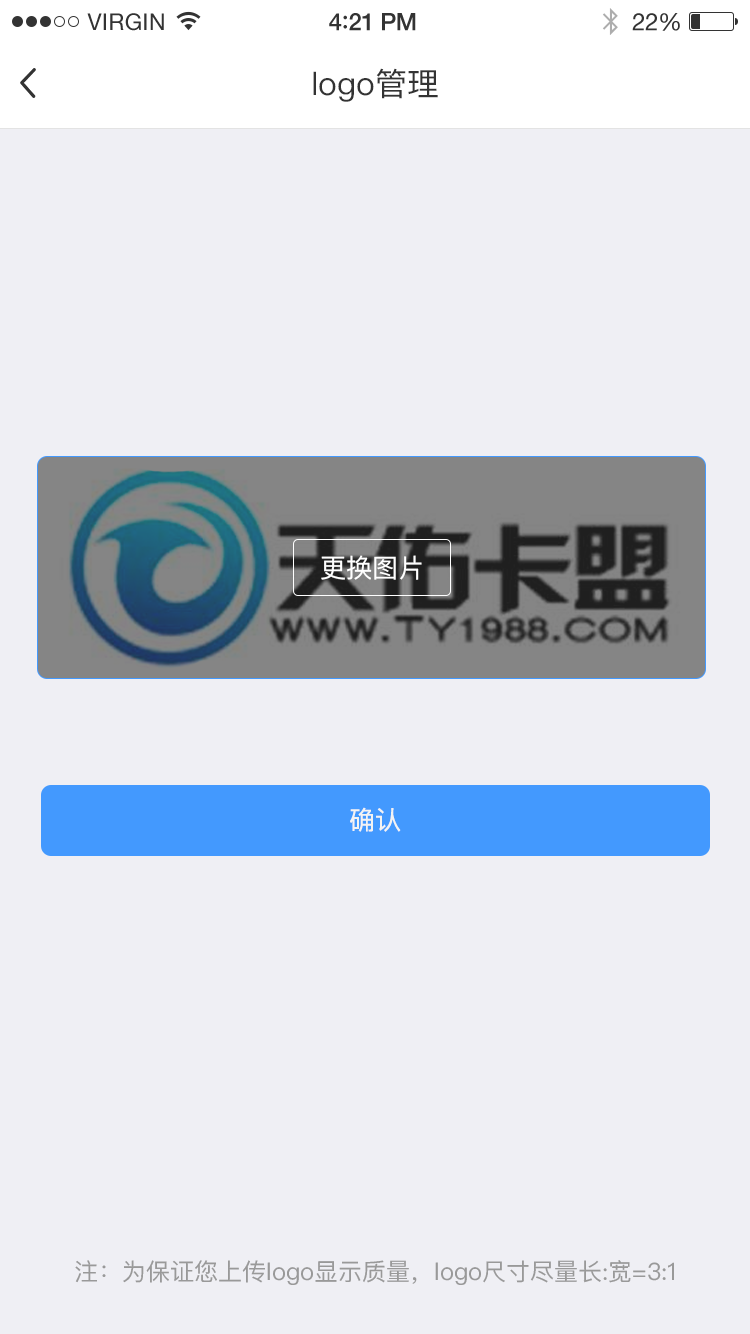
<style>
.page{position:relative;width:750px;height:1334px;background:#efeff4}
.page>*{position:absolute;margin:0}
.t1{font:32px "PingFangSC-Regular";color:#333333}
.t2{font:26px "PingFangSC-Regular";color:#ffffff}
.t3{font:26px "PingFangSC-Regular";color:#f3f3f3}
.t4{font:24px "PingFangSC-Regular";color:#999999}
</style>
<div class="page">
<p class="t1" style="left:313px;top:68px;width:125px;height:34px">logo管理</p>
<p class="t2" style="left:321px;top:555px;width:101px;height:25px">更换图片</p>
<p class="t3" style="left:350px;top:807px;width:51px;height:25px">确认</p>
<p class="t4" style="left:75px;top:1260px;width:599px;height:25px">注：为保证您上传logo显示质量，logo尺寸尽量长:宽=3:1</p>
</div>
